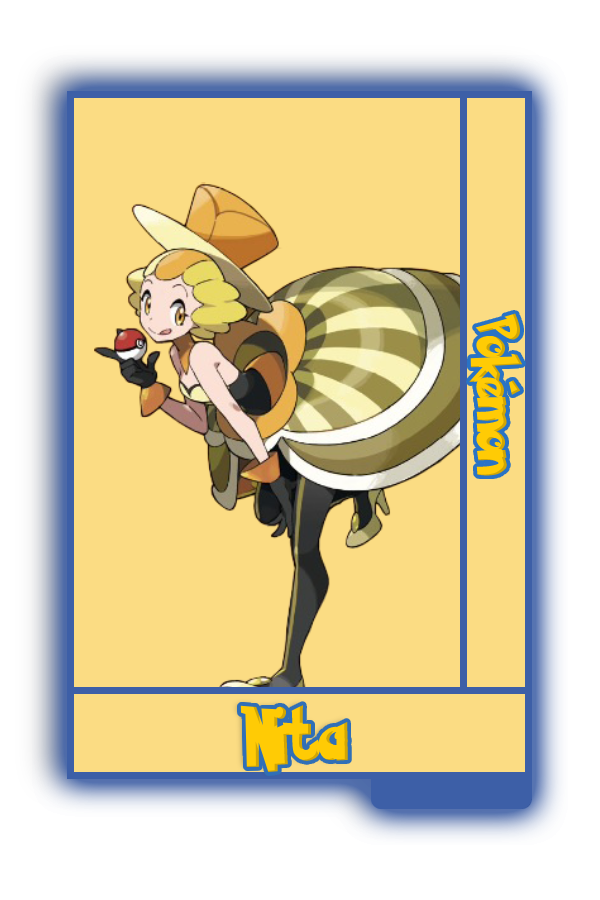
<style>
.page{position:relative;width:600px;height:900px;background:#fbdc83}
.page>*{position:absolute;margin:0}
.t1{font:48.8px "PokemonSolidNormal";color:#ffcb05;scale:0.8 1}
.t2{font:56.6px "PokemonSolidNormal";color:#ffcb05;scale:0.92 1}
</style>
<div class="page">
<p class="t1" style="left:469px;top:313px;width:54px;height:163px;rotate:90deg">Pokémon</p>
<p class="t2" style="left:240px;top:705px;width:108px;height:67px">Nita</p>
</div>
